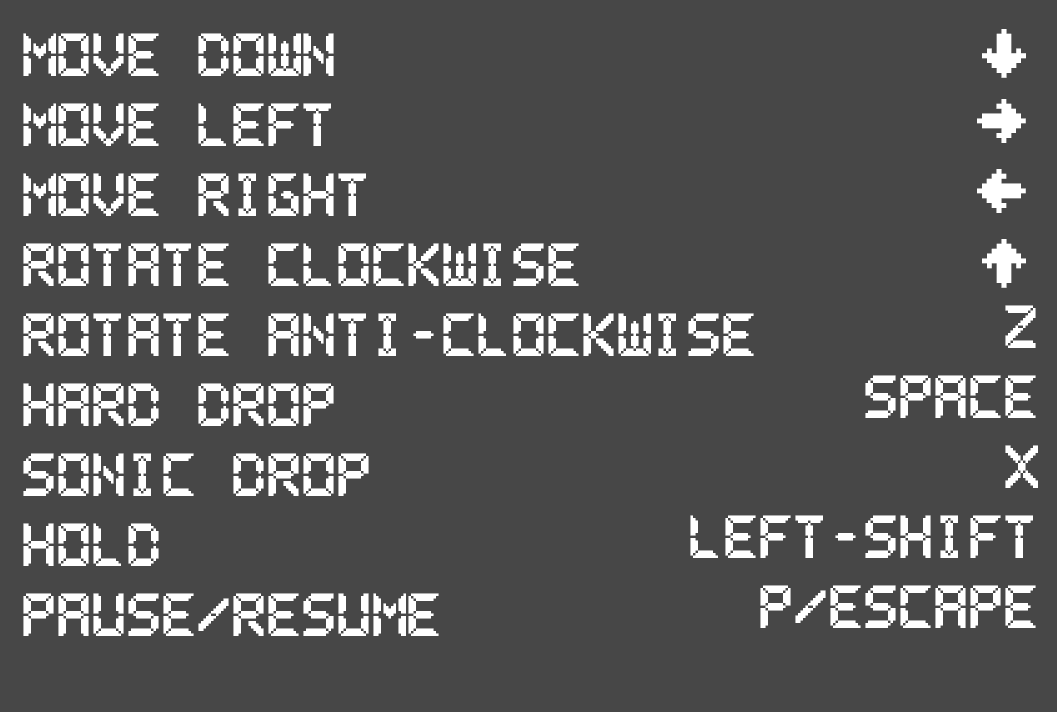
<style>
.page{position:relative;width:1057px;height:712px;background:#474747}
.page>*{position:absolute;margin:0}
.t1{font:50px/70px "PixelLCD-7";color:#ffffff}
.t2{font:50px/70px "PixArrows";color:#ffffff}
</style>
<div class="page">
<p class="t1" style="left:690px;top:29px;width:348px;height:599px;text-align:right"><span class="t2">b<br>A<br>a<br>B<br></span> Z<br>Space<br>X<br>LEFT-SHIFT<br>P/Escape</p>
<p class="t1" style="left:23px;top:33px;width:731px;height:603px">MOVE DOWN<br>MOVE LEFT<br>MOVE RIGHT<br>ROTATE CLOCKWISE<br>ROTATE ANTI-CLOCKWISE<br>HARD DROP<br>SONIC DROP<br>HOLD<br>PAUSE/RESUME</p>
</div>
